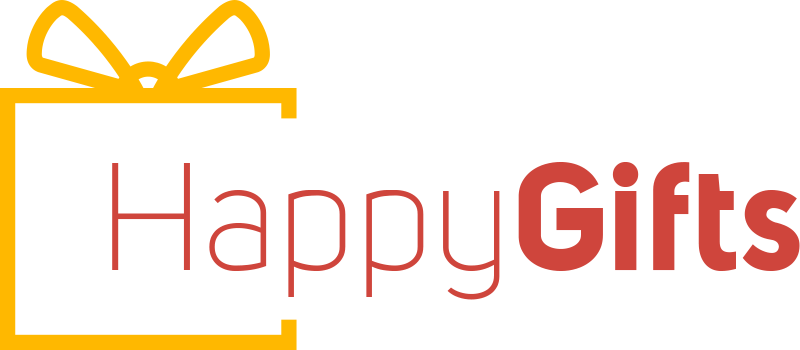
<style>
.page{position:relative;width:800px;height:350px;background:#ffffff}
.page>*{position:absolute;margin:0}
.t1{font:152.1px "UniSansLight";color:#cf453c}
.t2{font:152.1px "UniSansBold";color:#cf453c}
</style>
<div class="page">
<p class="t1" style="left:112px;top:162px;width:688px;height:138px">Happy<span class="t2">Gifts</span></p>
</div>
